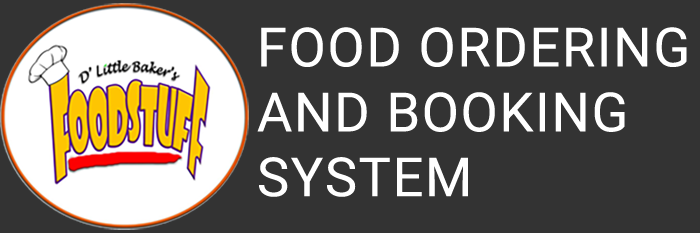
<style>
.page{position:relative;width:700px;height:233px;background:#333333}
.page>*{position:absolute;margin:0}
.t1{font:54.1px "Roboto-Regular";letter-spacing:0.03em;color:#ffffff}
</style>
<div class="page">
<p class="t1" style="left:257px;top:27px;width:430px;height:170px">FOOD ORDERING<br>AND BOOKING<br>SYSTEM</p>
</div>
